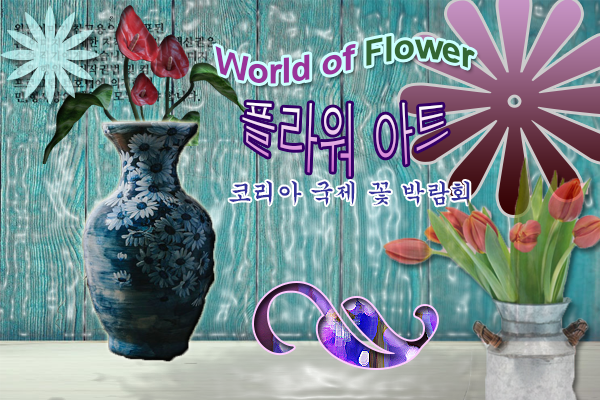
<style>
.page{position:relative;width:600px;height:400px}
.page>*{position:absolute;margin:0}
.t1{font:35px "Arial-BoldMT";letter-spacing:-0.01em;color:#993399}
.t2{font:35px "Arial-BoldMT";letter-spacing:-0.01em;color:#336633}
.t3{font:40px "Dotum";letter-spacing:-0.01em}
.t4{font:25px "Gungsuh";letter-spacing:-0.01em;color:#333399}
</style>
<div class="page">
<p class="t1" style="left:215px;top:35px;width:260px;height:49px">World of <span class="t2">Flower</span></p>
<p class="t3" style="left:242px;top:102px;width:206px;height:75px;text-align:center">플라워 아트</p>
<p class="t4" style="left:229px;top:181px;width:241px;height:25px">코리아 국제 꽃 박람회</p>
</div>
